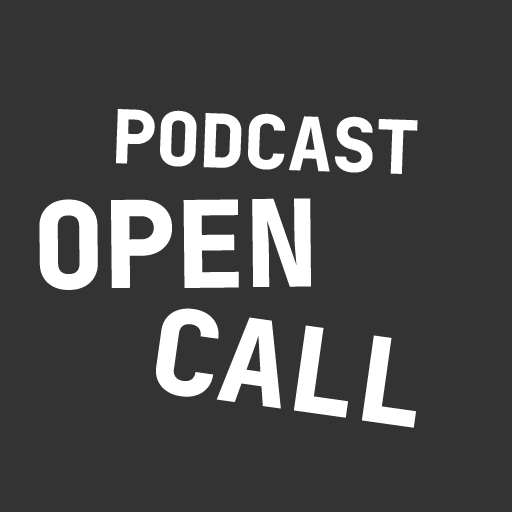
<style>
.page{position:relative;width:512px;height:512px;background:#333333}
.page>*{position:absolute;margin:0}
.t1{font:74.4px "JetBrainsMono-ExtraBold";letter-spacing:-0.01em;color:#ffffff}
.t2{font:120.3px "JetBrainsMono-ExtraBold";letter-spacing:-0.01em;color:#ffffff}
.t3{font:117.2px "JetBrainsMono-ExtraBold";letter-spacing:-0.01em;color:#ffffff}
</style>
<div class="page">
<p class="t1" style="left:116px;top:109px;width:302px;height:65px;rotate:2deg">PODCAST</p>
<p class="t2" style="left:39px;top:198px;width:272px;height:92px;rotate:-1deg">OPEN</p>
<p class="t3" style="left:156px;top:308px;width:260px;height:120px;rotate:8deg">CALL</p>
</div>
